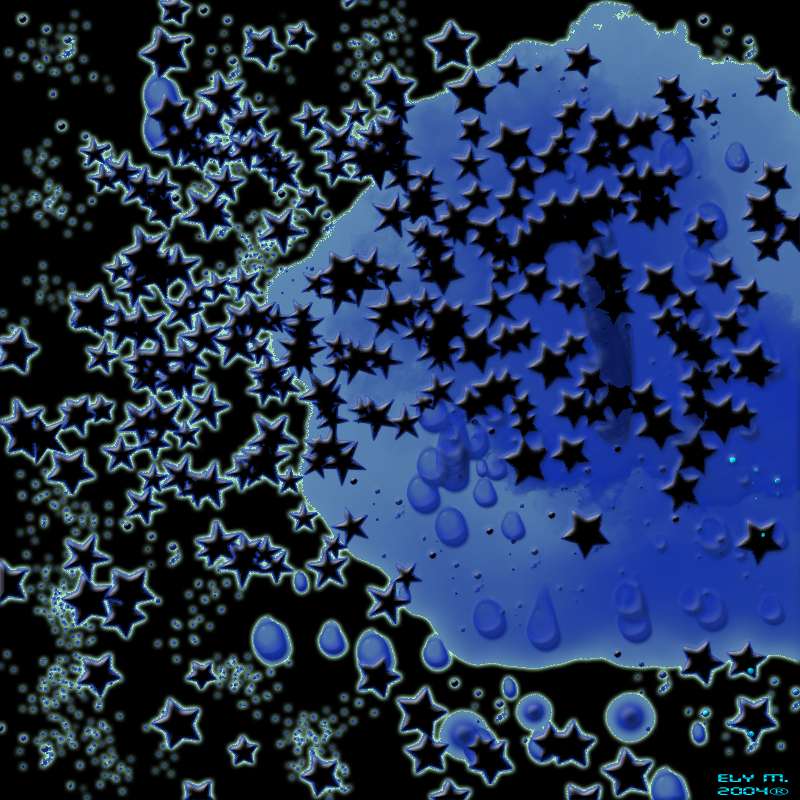
<style>
.page{position:relative;width:800px;height:800px;background:#000000}
.page>*{position:absolute;margin:0}
.t1{font:11px "Transistor";letter-spacing:0.01em;color:#00e4ff;scale:2.5 1}
</style>
<div class="page">
<p class="t1" style="left:717px;top:774px;width:72px;height:22px;text-align:center">ELY M.<br>2004®</p>
</div>
